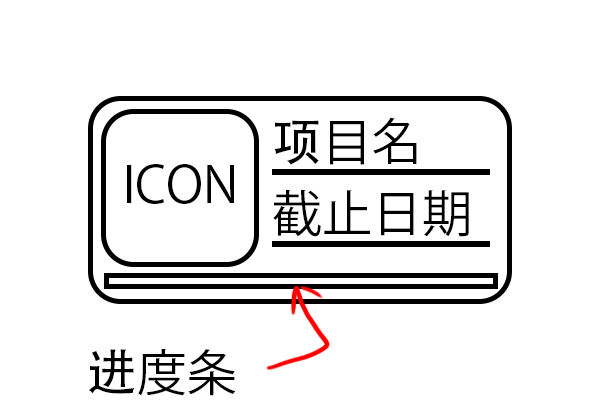
<style>
.page{position:relative;width:600px;height:400px;background:#ffffff}
.page>*{position:absolute;margin:0}
.t1{font:50px "KozGoPr6N-Regular";color:#000000}
.t2{font:50px "AdobeHeitiStd-Regular";color:#000000}
</style>
<div class="page">
<p class="t1" style="left:274px;top:117px;width:143px;height:48px"><span class="t2">项</span>目名</p>
<p class="t1" style="left:127px;top:164px;width:107px;height:40px">ICON</p>
<p class="t1" style="left:273px;top:189px;width:196px;height:48px">截止日期</p>
<p class="t1" style="left:89px;top:348px;width:147px;height:48px"><span class="t2">进</span>度条</p>
</div>
